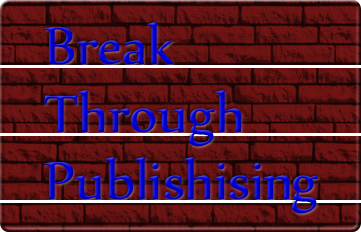
<style>
.page{position:relative;width:361px;height:232px}
.page>*{position:absolute;margin:0}
.t1{font:63.6px/67.5px "Nyala-Regular"}
</style>
<div class="page">
<p class="t1" style="left:44px;top:22px;width:274px;height:192px">Break<br>Through<br>Publishising</p>
</div>
